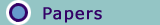
<style>
.page{position:relative;width:160px;height:25px;background:#94c5c5}
.page>*{position:absolute;margin:0}
.t1{font:16px "Verdana";letter-spacing:0.055em;color:#330066;font-weight:bold}
</style>
<div class="page">
<p class="t1" style="left:43px;top:7px;width:59px;height:16px">Papers</p>
</div>
